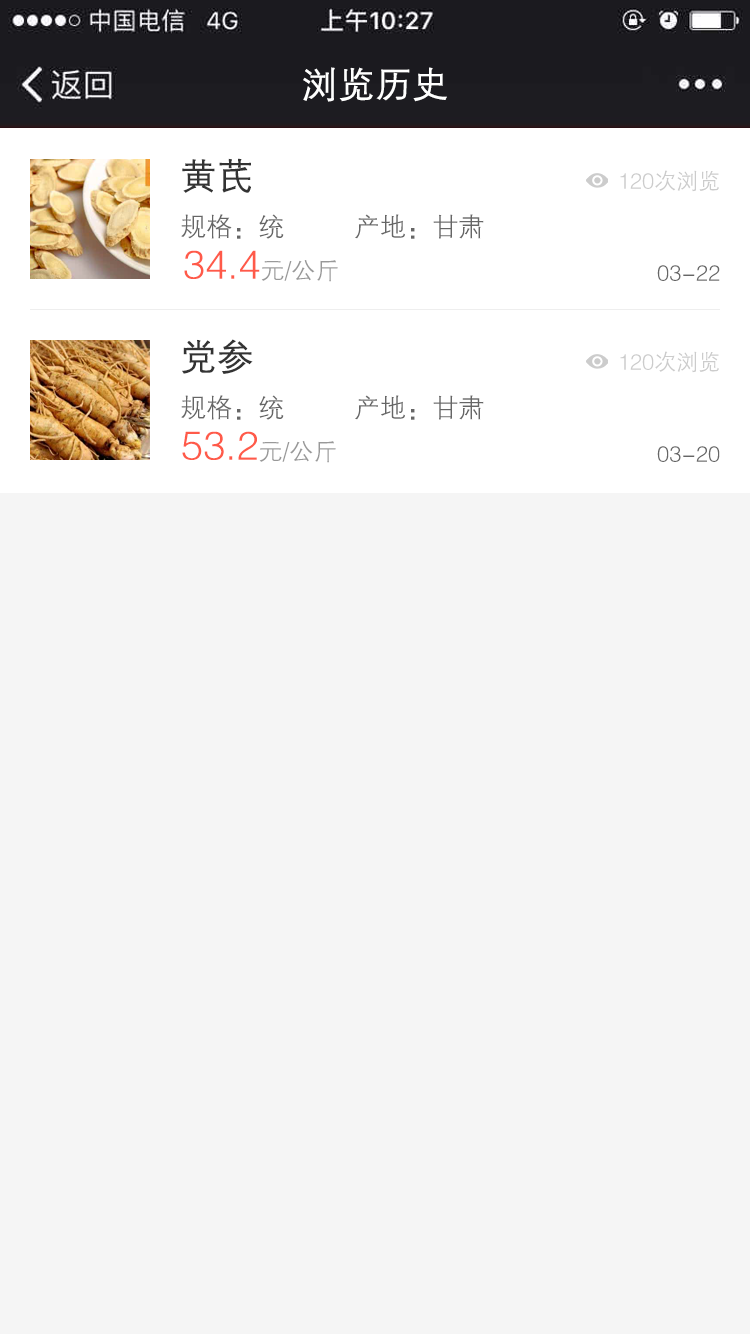
<style>
.page{position:relative;width:750px;height:1334px;background:#f5f5f5}
.page>*{position:absolute;margin:0}
.t1{font:36px "FZZDXJW--GB1-0";color:#ffffff;font-weight:bold}
.t2{font:36px "FZZDXJW--GB1-0";color:#333333;font-weight:bold}
.t3{font:22px "FZZDXJW--GB1-0";color:#cccccc}
.t4{font:26px "FZZDXJW--GB1-0";color:#666666}
.t5{font:40px "FZZDXJW--GB1-0";color:#ff5a49}
.t6{font:24px "FZZDXJW--GB1-0";color:#999999}
.t7{font:22px "FZZDXJW--GB1-0";color:#666666}
</style>
<div class="page">
<p class="t1" style="left:303px;top:67px;width:144px;height:35px">浏览历史</p>
<p class="t2" style="left:182px;top:158px;width:69px;height:35px">黄芪</p>
<p class="t3" style="left:620px;top:170px;width:99px;height:22px">120次浏览</p>
<p class="t4" style="left:181px;top:214px;width:103px;height:25px">规格：统</p>
<p class="t4" style="left:355px;top:214px;width:129px;height:25px">产地：甘肃</p>
<p class="t5" style="left:184px;top:250px;width:154px;height:32px">34.4<span class="t6">元/公斤</span></p>
<p class="t7" style="left:657px;top:265px;width:63px;height:16px">03-22</p>
<p class="t2" style="left:182px;top:339px;width:71px;height:35px">党参</p>
<p class="t3" style="left:620px;top:351px;width:99px;height:22px">120次浏览</p>
<p class="t4" style="left:181px;top:395px;width:103px;height:25px">规格：统</p>
<p class="t4" style="left:355px;top:395px;width:129px;height:25px">产地：甘肃</p>
<p class="t5" style="left:182px;top:431px;width:154px;height:32px">53.2<span class="t6">元/公斤</span></p>
<p class="t7" style="left:657px;top:446px;width:63px;height:16px">03-20</p>
</div>
